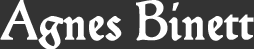
<style>
.page{position:relative;width:254px;height:49px;background:#333333}
.page>*{position:absolute;margin:0}
.t1{font:54.2px "Hamlet-Tertia18";color:#ffffff;font-weight:bold}
</style>
<div class="page">
<p class="t1" style="left:0px;top:0px;width:254px;height:50px">Agnes Binett</p>
</div>
